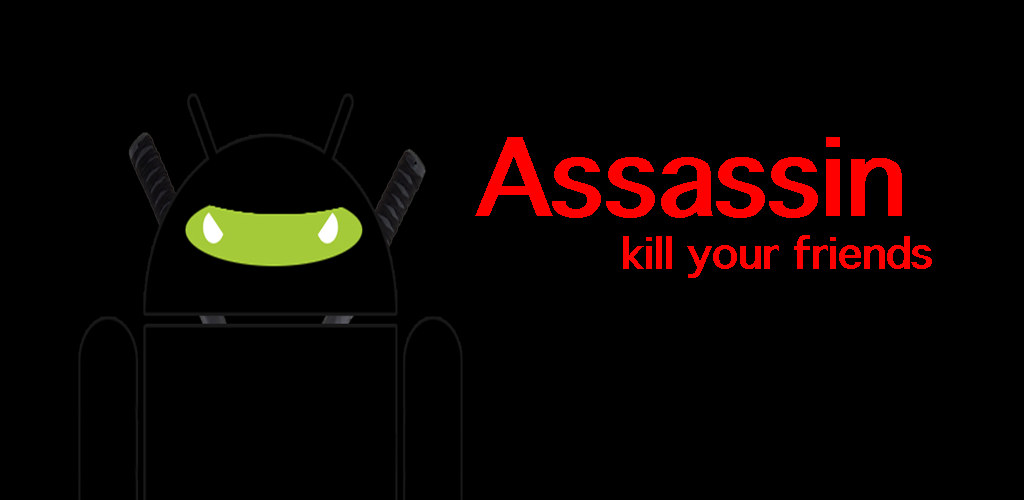
<style>
.page{position:relative;width:1024px;height:500px;background:#000000}
.page>*{position:absolute;margin:0}
.t1{font:104.2px "Thonburi-Bold";color:#ff0000}
.t2{font:41.7px "Thonburi-Bold";color:#ff0000}
</style>
<div class="page">
<p class="t1" style="left:475px;top:137px;width:427px;height:81px">Assassin</p>
<p class="t2" style="left:623px;top:235px;width:309px;height:43px">kill your friends</p>
</div>
